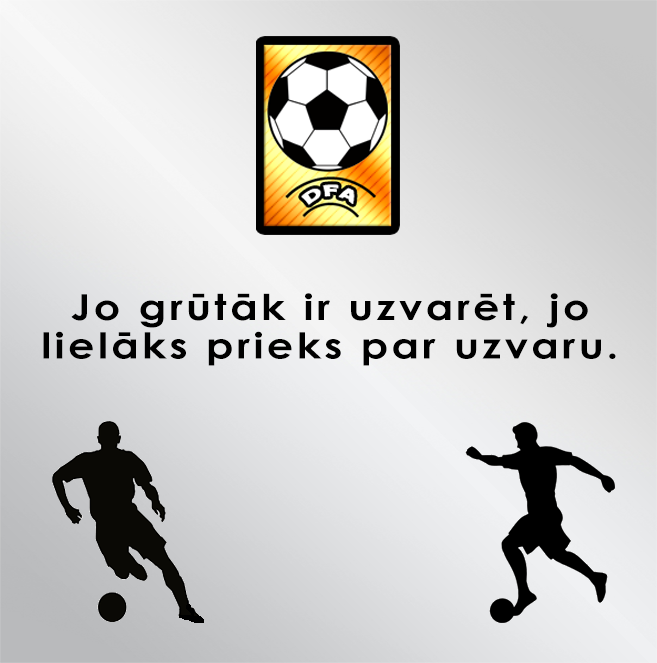
<style>
.page{position:relative;width:657px;height:663px}
.page>*{position:absolute;margin:0}
.t1{font:35.8px "CenturyGothic-Bold";letter-spacing:0.08em;color:#000000;scale:1.16 1}
</style>
<div class="page">
<p class="t1" style="left:43px;top:293px;width:573px;height:73px;text-align:center">Jo grūtāk ir uzvarēt, jo<br>lielāks prieks par uzvaru.</p>
</div>
